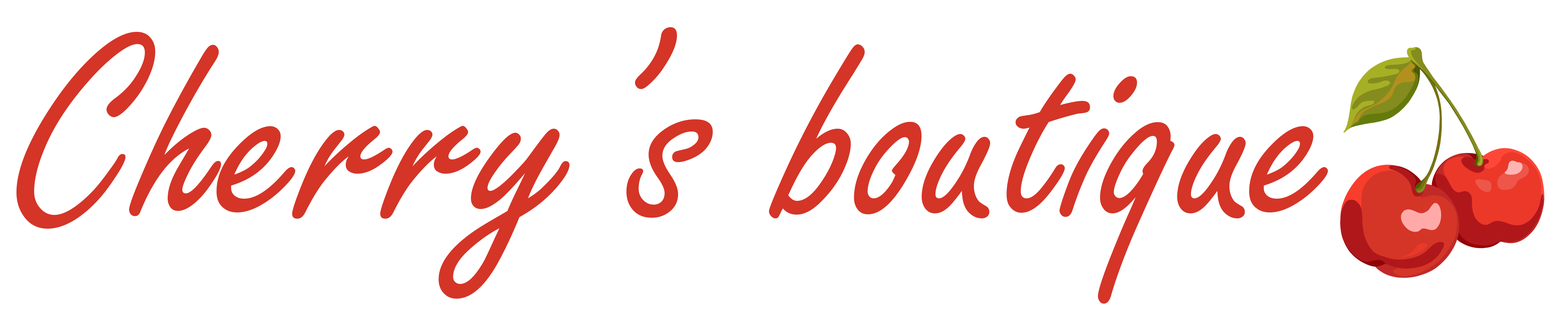
<style>
.page{position:relative;width:1568px;height:328px;background:#ffffff}
.page>*{position:absolute;margin:0}
.t1{font:287.4px "FreestyleScript-Regular";color:#d43527}
</style>
<div class="page">
<p class="t1" style="left:16px;top:27px;width:1312px;height:277px">Cherry’s boutique</p>
</div>
